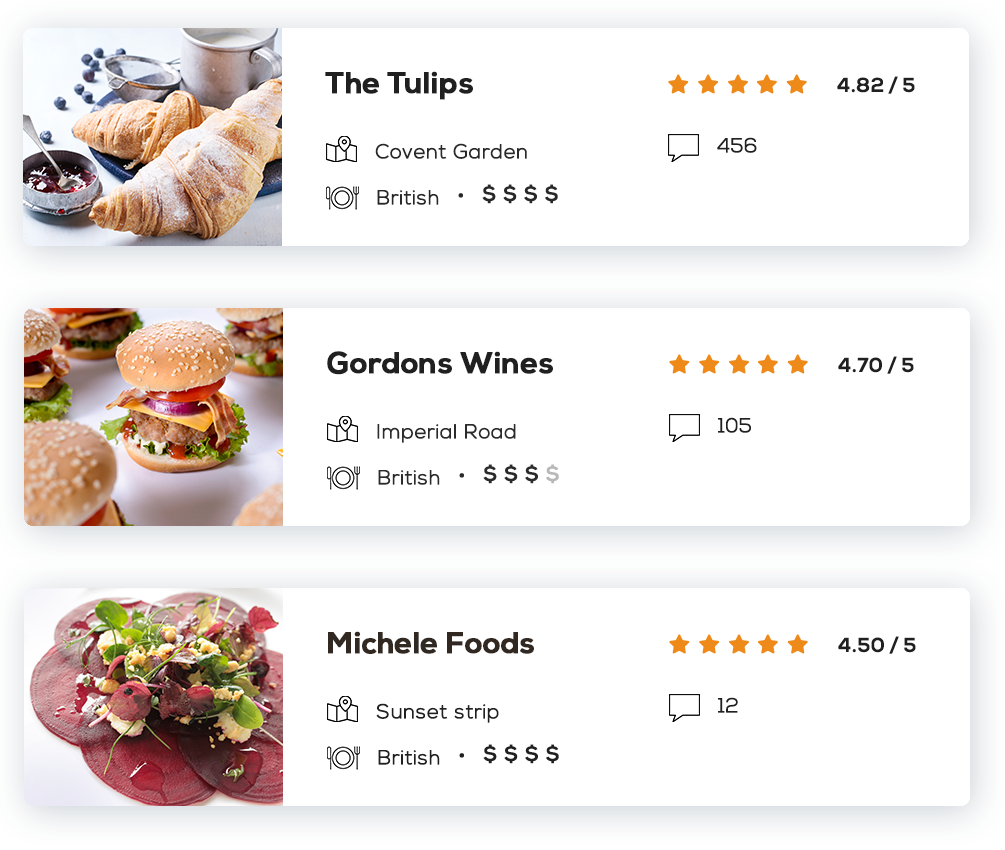
<style>
.page{position:relative;width:1005px;height:850px;background:#ffffff}
.page>*{position:absolute;margin:0}
.t1{font:30px "NexaBold";color:#202020;font-weight:bold}
.t2{font:20px "NexaBold";letter-spacing:0.02em;color:#202020}
.t3{font:20px "NexaLight";letter-spacing:0.02em;color:#202020;font-weight:bold}
.t4{font:20px "NexaLight";letter-spacing:0.02em;color:#282828;font-weight:bold}
.t5{font:20px "NexaBold";letter-spacing:0.02em;color:#282828}
.t6{font:30px "NexaBold";letter-spacing:0.02em;color:#282828}
.t7{font:20px "NexaLight";letter-spacing:0.02em;color:#2b2b2b;font-weight:bold}
.t8{font:30px "NexaBold";letter-spacing:0.02em;color:#2b2b2b}
.t9{font:20px "NexaBold";letter-spacing:0.02em;color:#2b2b2b}
.t10{font:20px "NexaBold";letter-spacing:0.02em;color:#b9b8b8}
.t11{font:30px "NexaBold";color:#322822;font-weight:bold}
.t12{font:30px "NexaBold";letter-spacing:0.02em;color:#202020}
</style>
<div class="page">
<p class="t1" style="left:325px;top:71px;width:148px;height:29px">The Tulips</p>
<p class="t2" style="left:837px;top:76px;width:78px;height:18px">4.82 / 5</p>
<p class="t3" style="left:717px;top:137px;width:40px;height:16px">456</p>
<p class="t4" style="left:375px;top:143px;width:152px;height:16px">Covent Garden</p>
<p class="t5" style="left:482px;top:184px;width:76px;height:20px">$ $ $ $</p>
<p class="t4" style="left:377px;top:190px;width:62px;height:15px">British</p>
<p class="t6" style="left:458px;top:193px;width:5px;height:5px">.</p>
<p class="t1" style="left:327px;top:351px;width:226px;height:24px">Gordons Wines</p>
<p class="t2" style="left:838px;top:356px;width:76px;height:18px">4.70 / 5</p>
<p class="t7" style="left:377px;top:424px;width:139px;height:19px">Imperial Road</p>
<p class="t3" style="left:718px;top:417px;width:33px;height:16px">105</p>
<p class="t7" style="left:378px;top:470px;width:62px;height:15px">British</p>
<p class="t8" style="left:459px;top:473px;width:5px;height:5px">.</p>
<p class="t9" style="left:483px;top:464px;width:76px;height:20px">$ $ $ <span class="t10">$</span></p>
<p class="t11" style="left:328px;top:631px;width:206px;height:23px">Michele Foods</p>
<p class="t2" style="left:838px;top:636px;width:78px;height:18px">4.50 / 5</p>
<p class="t3" style="left:718px;top:697px;width:20px;height:16px">12</p>
<p class="t3" style="left:376px;top:703px;width:123px;height:20px">Sunset strip</p>
<p class="t3" style="left:378px;top:750px;width:62px;height:15px">British</p>
<p class="t2" style="left:483px;top:744px;width:76px;height:20px">$ $ $ $</p>
<p class="t12" style="left:459px;top:753px;width:5px;height:5px">.</p>
</div>
